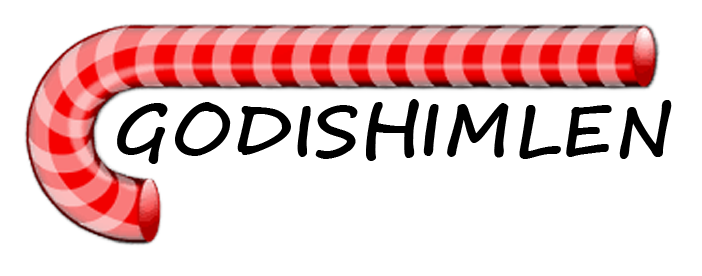
<style>
.page{position:relative;width:702px;height:276px;background:#ffffff}
.page>*{position:absolute;margin:0}
.t1{font:72px "SegoeScript-Bold";color:#000000}
</style>
<div class="page">
<p class="t1" style="left:117px;top:99px;width:555px;height:65px">GODISHIMLEN</p>
</div>
